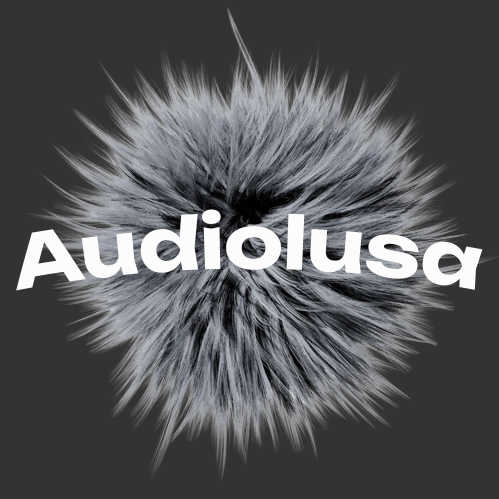
<style>
.page{position:relative;width:499px;height:499px;background:#333333}
.page>*{position:absolute;margin:0}
.t1{font:72px "Unbounded-Bold";color:#fdfcfc}
</style>
<div class="page">
<p class="t1" style="left:16px;top:209px;width:467px;height:82px">Audiolusa</p>
</div>
